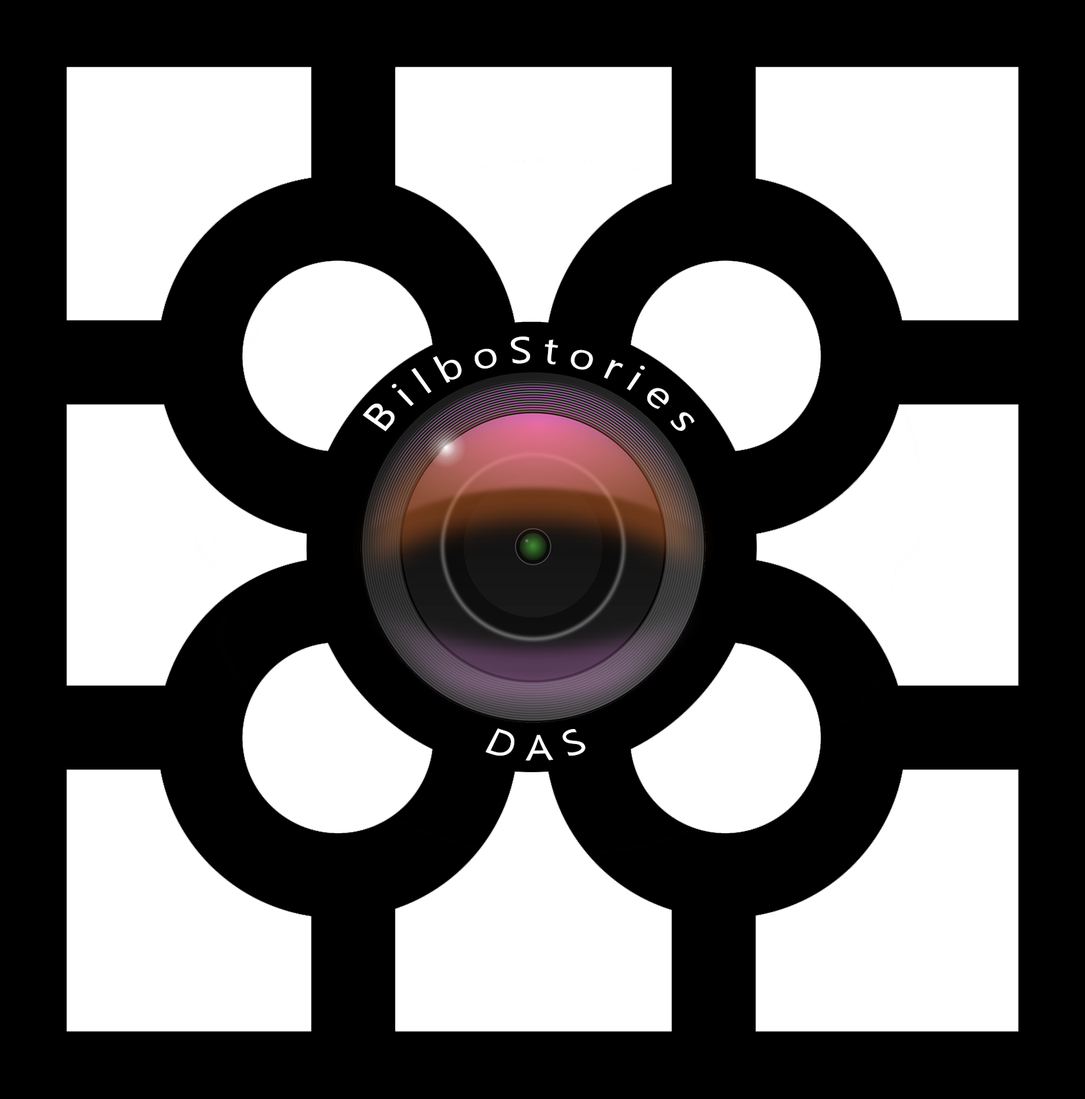
<style>
.page{position:relative;width:1085px;height:1099px;background:#000000}
.page>*{position:absolute;margin:0}
.t1{font:34.3px "NirmalaUI";color:#ffffff}
</style>
<div class="page">
<p class="t1" style="left:362px;top:336px;width:333px;height:96px;text-align:center">B i l b o S t o r i e s</p>
<p class="t1" style="left:486px;top:728px;width:100px;height:32px">D A S</p>
</div>
